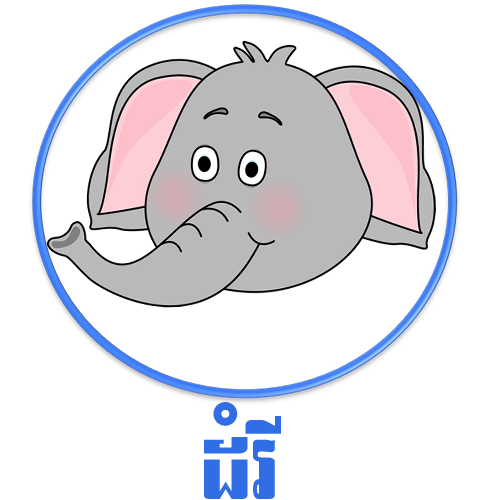
<style>
.page{position:relative;width:500px;height:500px;background:#ffffff}
.page>*{position:absolute;margin:0}
.t1{font:81px "NiDAAngkor";color:#316de5}
</style>
<div class="page">
<p class="t1" style="left:204px;top:402px;width:77px;height:97px">ដំរី</p>
</div>
